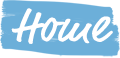
<style>
.page{position:relative;width:120px;height:58px;background:#6cafd9}
.page>*{position:absolute;margin:0}
.t1{font:48px "MarketOT";color:#ffffff}
</style>
<div class="page">
<p class="t1" style="left:11px;top:8px;width:102px;height:36px">Home</p>
</div>
